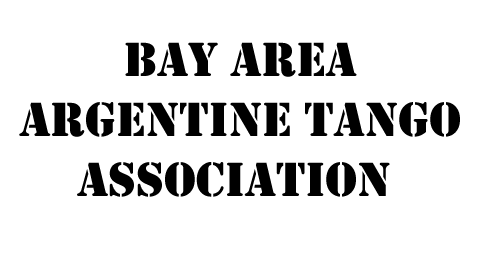
<style>
.page{position:relative;width:480px;height:270px;background:#ffffff}
.page>*{position:absolute;margin:0}
.t1{font:50px "Stencil";color:#000000}
</style>
<div class="page">
<p class="t1" style="left:19px;top:42px;width:441px;height:155px;text-align:center">Bay Area<br>Argentine Tango<br>Association</p>
</div>
